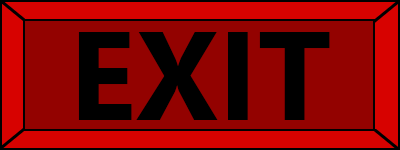
<style>
.page{position:relative;width:400px;height:150px;background:#930200}
.page>*{position:absolute;margin:0}
.t1{font:125px "NirmalaUI-Bold";color:#000000}
</style>
<div class="page">
<p class="t1" style="left:78px;top:32px;width:252px;height:88px">EXIT</p>
</div>
